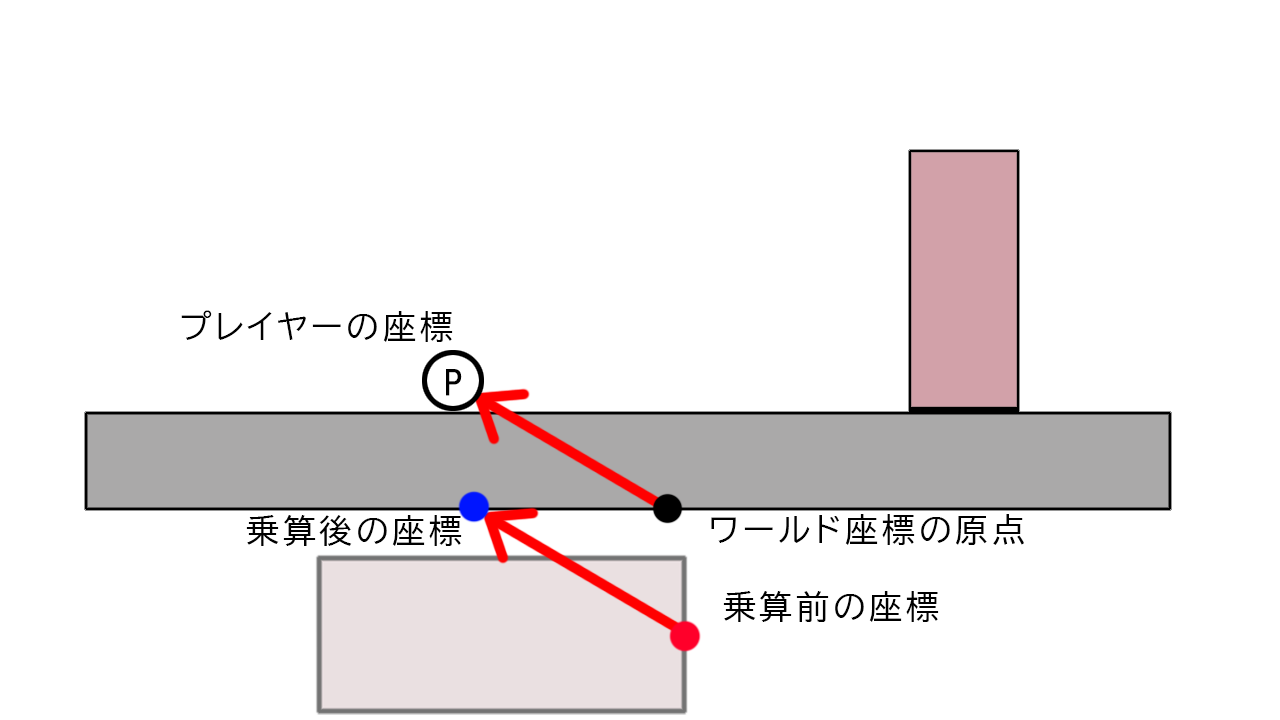
<style>
.page{position:relative;width:1280px;height:720px;background:#ffffff}
.page>*{position:absolute;margin:0}
.t1{font:33.3px "BIZ-UDPGothic";letter-spacing:0.1em;color:#000000}
.t2{font:33.3px "HGPGothicE";letter-spacing:0.1em;color:#000000}
</style>
<div class="page">
<p class="t1" style="left:181px;top:310px;width:272px;height:32px">プレイヤーの座標</p>
<p class="t2" style="left:446px;top:369px;width:16px;height:27px">P</p>
<p class="t1" style="left:246px;top:515px;width:216px;height:31px">乗算後の座標</p>
<p class="t1" style="left:711px;top:514px;width:313px;height:31px">ワールド座標の原点</p>
<p class="t1" style="left:723px;top:591px;width:216px;height:31px">乗算前の座標</p>
</div>
